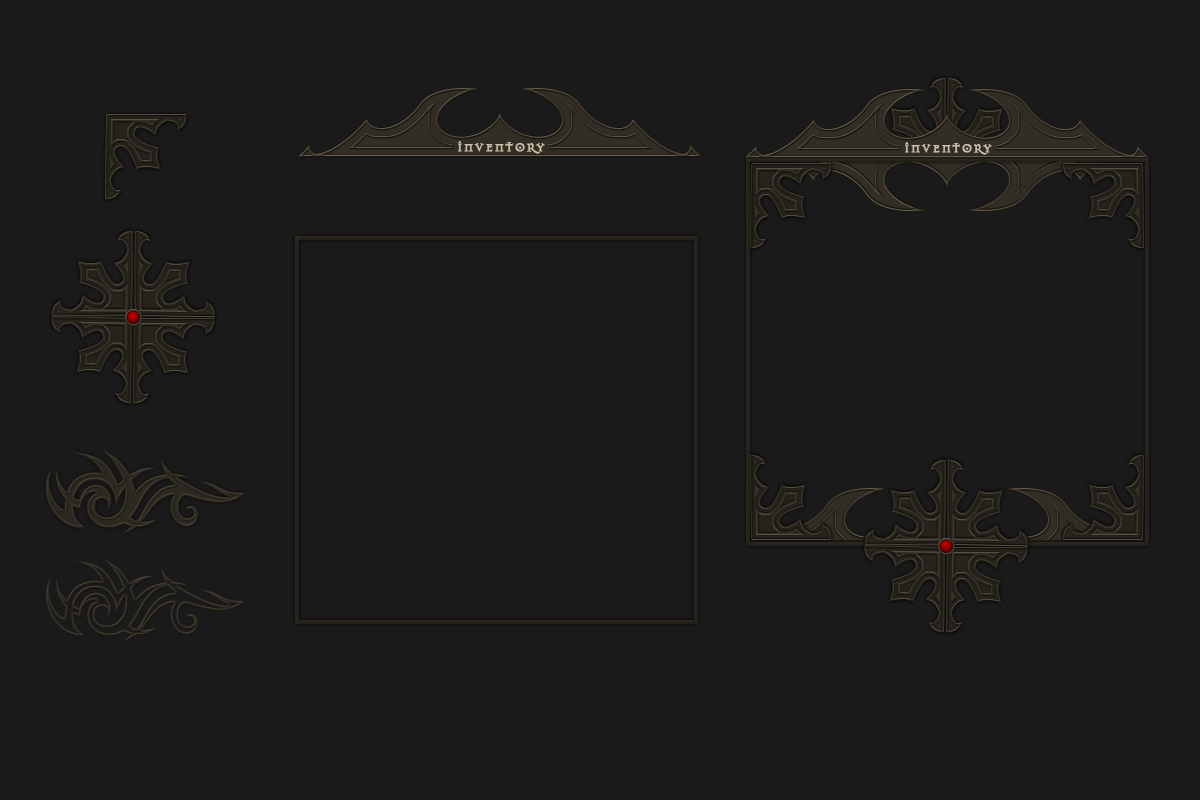
<style>
.page{position:relative;width:1200px;height:800px;background:#1a1a1a}
.page>*{position:absolute;margin:0}
.t1{font:18.1px "Dark11";letter-spacing:0.1em;color:#cec1ab;font-weight:bold}
</style>
<div class="page">
<p class="t1" style="left:458px;top:141px;width:87px;height:13px">inventory</p>
</div>
